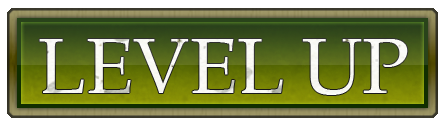
<style>
.page{position:relative;width:447px;height:125px}
.page>*{position:absolute;margin:0}
.t1{font:78px "Palton";color:#fefefe}
</style>
<div class="page">
<p class="t1" style="left:39px;top:39px;width:369px;height:56px">LEVEL UP</p>
</div>
